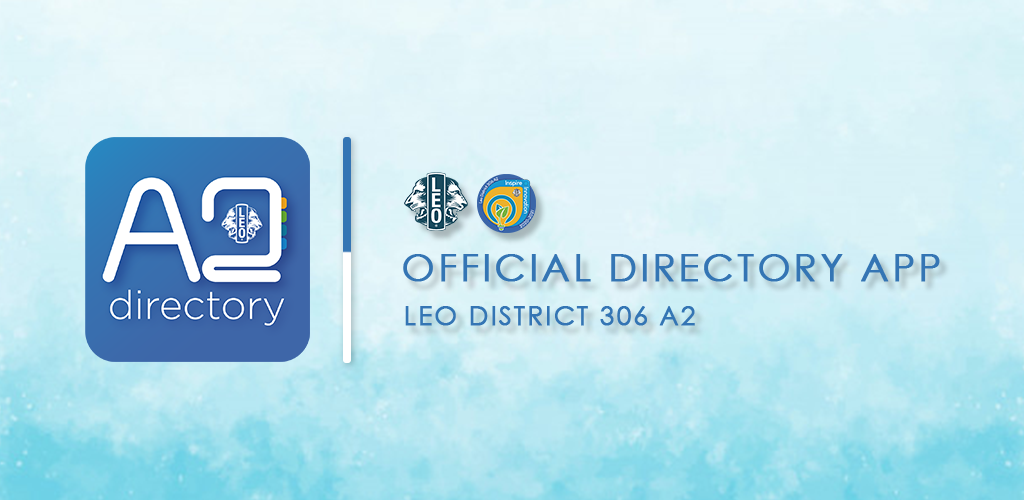
<style>
.page{position:relative;width:1024px;height:500px}
.page>*{position:absolute;margin:0}
.t1{font:38.4px "CenturyGothic";letter-spacing:0.06em;color:#3475b4;text-transform:uppercase;font-weight:bold}
.t2{font:26.1px "CenturyGothic";letter-spacing:0.06em;color:#3475b4;text-transform:uppercase;font-weight:bold}
</style>
<div class="page">
<p class="t1" style="left:403px;top:254px;width:537px;height:28px">Official Directory app</p>
<p class="t2" style="left:405px;top:306px;width:290px;height:20px">Leo District 306 A2</p>
</div>
